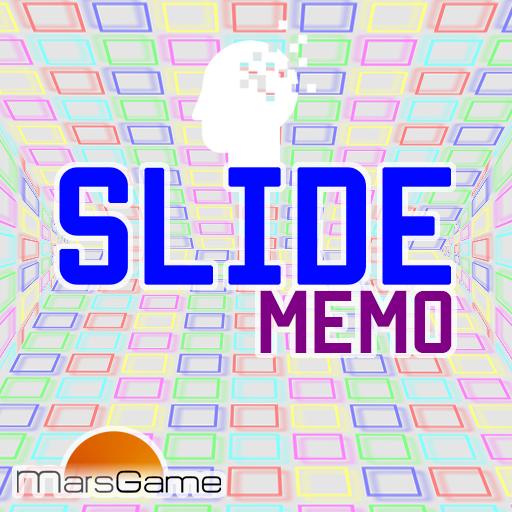
<style>
.page{position:relative;width:512px;height:512px}
.page>*{position:absolute;margin:0}
.t1{font:130px "MantekaCyrillic-Regular";color:#0006ff;font-weight:bold}
.t2{font:70px "MantekaCyrillic-Regular";color:#7f0084;font-weight:bold}
</style>
<div class="page">
<p class="t1" style="left:59px;top:167px;width:392px;height:118px">Slide</p>
<p class="t2" style="left:260px;top:290px;width:192px;height:63px">memo</p>
</div>
